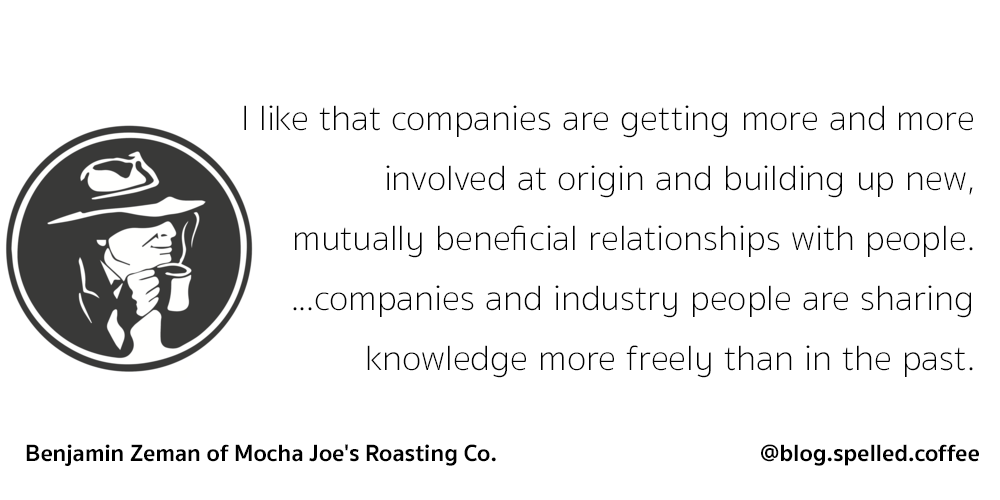
<style>
.page{position:relative;width:1000px;height:500px;background:#ffffff}
.page>*{position:absolute;margin:0}
.t1{font:36px/60px "SukhumvitSet-Thin";color:#000000}
.t2{font:24px "SukhumvitSet-Bold";color:#000000}
</style>
<div class="page">
<p class="t1" style="left:244px;top:105px;width:729px;height:273px;text-align:right">I like that companies are getting more and more<br>involved at origin and building up new,<br>mutually beneficial relationships with people.<br>...companies and industry people are sharing<br>knowledge more freely than in the past.</p>
<p class="t2" style="left:26px;top:444px;width:470px;height:22px">Benjamin Zeman of Mocha Joe's Roasting Co.</p>
<p class="t2" style="left:761px;top:444px;width:218px;height:22px">@blog.spelled.coffee</p>
</div>
